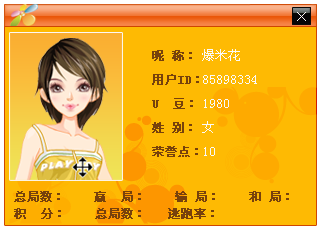
<style>
.page{position:relative;width:321px;height:230px;background:#feba03}
.page>*{position:absolute;margin:0}
.t1{font:12px/24px "SimSun";color:#77410c;font-weight:bold}
.t2{font:13px/24px "SimSun";color:#faf9f8}
.t3{font:12px/17px "SimSun";color:#77410c;font-weight:bold}
</style>
<div class="page">
<p class="t1" style="left:152px;top:50px;width:47px;height:107px">昵 称：<br>用户ID：<br>U  豆：<br>姓 别：<br>荣誉点：</p>
<p class="t2" style="left:202px;top:49px;width:55px;height:107px">爆米花<br>85898334 <br>1980<br>女<br>10</p>
<p class="t3" style="left:14px;top:191px;width:275px;height:28px">总局数：    赢  局：    输 局：    和 局：<br>积  分：    总局数：   逃跑率：</p>
</div>
